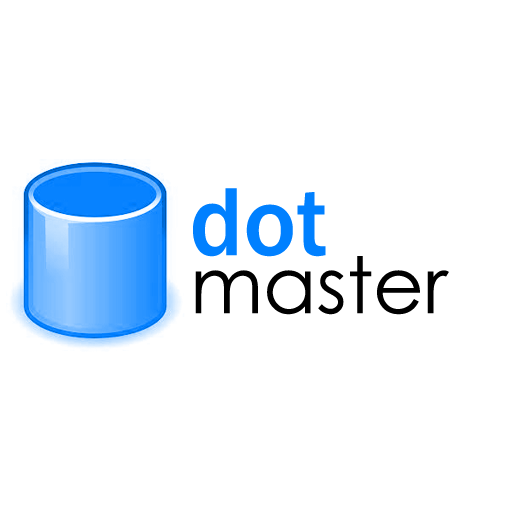
<style>
.page{position:relative;width:512px;height:512px;background:#ffffff}
.page>*{position:absolute;margin:0}
.t1{font:100px "FranklinGothic-Medium";color:#0080ff}
.t2{font:78px "CenturyGothic";color:#000000}
</style>
<div class="page">
<p class="t1" style="left:193px;top:188px;width:133px;height:69px">dot</p>
<p class="t2" style="left:195px;top:256px;width:254px;height:59px">master</p>
</div>
